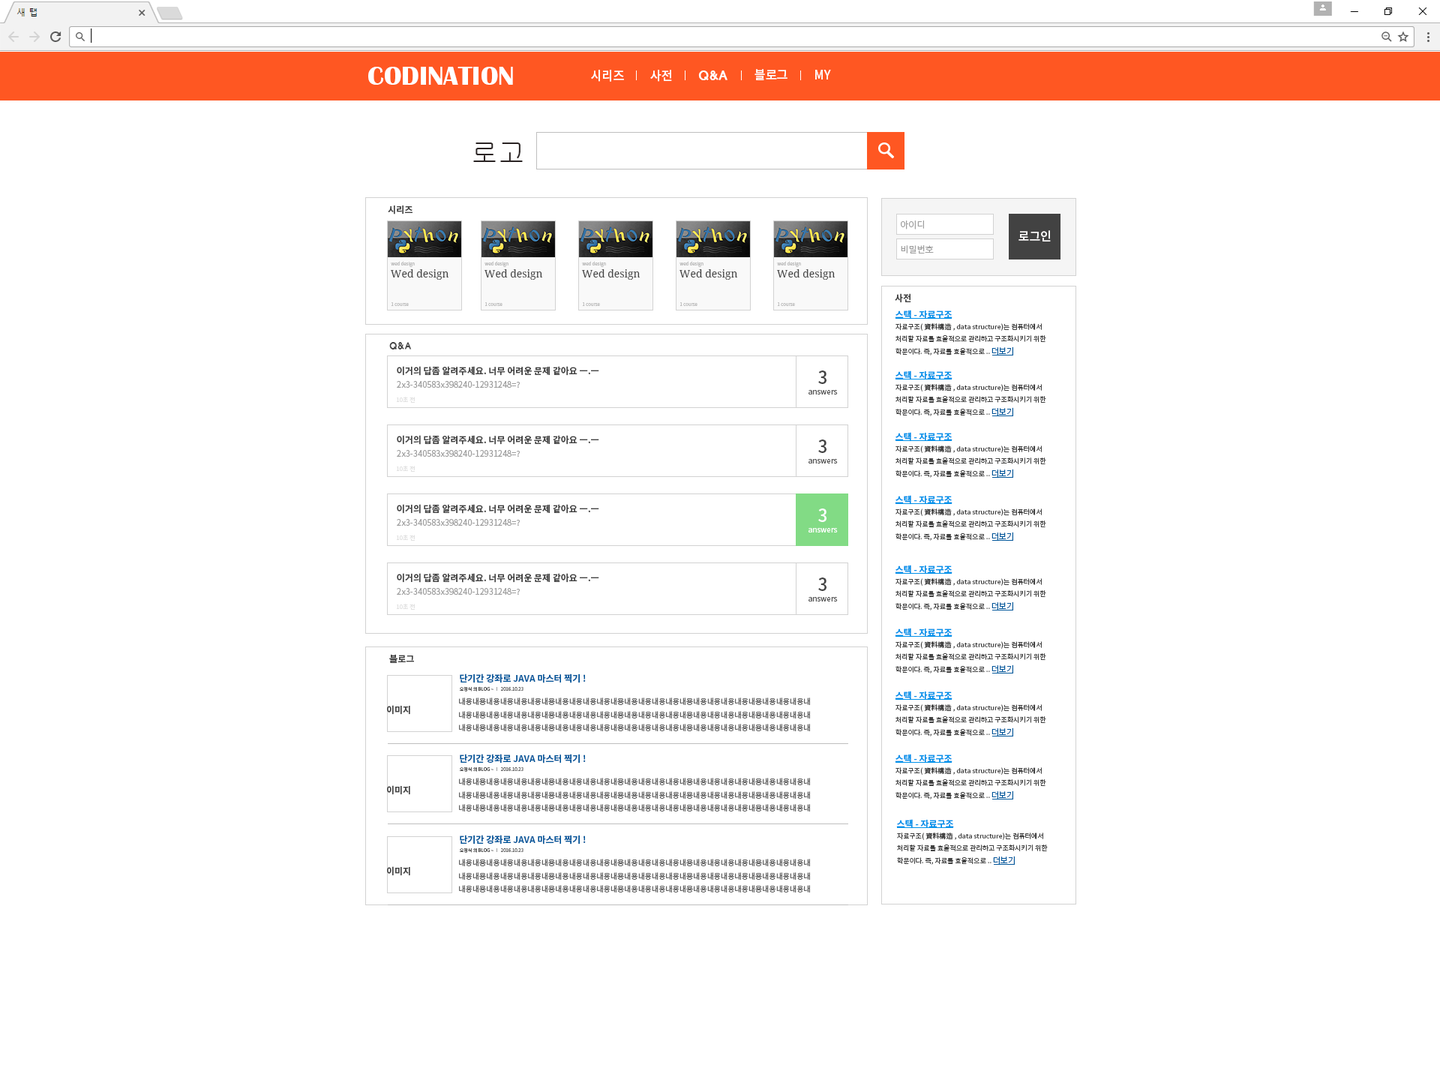
<style>
.page{position:relative;width:1440px;height:1077px;background:#ffffff}
.page>*{position:absolute;margin:0}
.t1{font:27px "BritannicBold";color:#ffffff}
.t2{font:12.4px "NotoSansCJKkr-Medium";letter-spacing:-0.01em;color:#ffffff}
.t3{font:12.4px "HYwulB";letter-spacing:-0.025em;color:#ffffff}
.t4{font:27px "Gulim";color:#2a2323}
.t5{font:9px "NotoSansCJKkr-Bold";color:#424242}
.t6{font:9px "NotoSansCJKkr-DemiLight";color:#9e9e9e}
.t7{font:12px "NotoSansCJKkr-Medium";color:#fffefe}
.t8{font:10.5px "NotoSerif";color:#424242}
.t9{font:4.5px "NotoSansCJKkr-Regular";color:#bdbdbd}
.t10{font:9px "NotoSansCJKkr-Bold";color:#0091ea}
.t11{font:6.8px "NotoSansCJKkr-Regular";color:#424242}
.t12{font:8.2px "NotoSansCJKkr-Regular";color:#01579b}
.t13{font:9px "HYwulB";color:#424242}
.t14{font:18px "NotoSansCJKkr-Medium";color:#424242}
.t15{font:8.2px "NotoSansCJKkr-Regular";color:#9e9e9e}
.t16{font:7.5px "NotoSansCJKkr-Regular";color:#505050}
.t17{font:6px "NotoSansCJKkr-Regular";color:#e0e0e0}
.t18{font:18px "NotoSansCJKkr-Medium";color:#ffffff}
.t19{font:7.5px "NotoSansCJKkr-Regular";color:#ffffff}
.t20{font:9px "NotoSansCJKkr-Bold";color:#01579b}
.t21{font:4.5px "NotoSansCJKkr-Regular";color:#424242}
.t22{font:4.5px "NotoSansCJKkr-Regular";color:#616161}
.t23{font:7.5px "NotoSansCJKkr-Regular";color:#616161}
</style>
<div class="page">
<p class="t1" style="left:368px;top:67px;width:145px;height:18px">CODINATION</p>
<p class="t2" style="left:591px;top:70px;width:33px;height:12px">시리즈</p>
<p class="t2" style="left:650px;top:70px;width:22px;height:12px">사전</p>
<p class="t3" style="left:698px;top:70px;width:30px;height:10px">Q&amp;A</p>
<p class="t2" style="left:754px;top:69px;width:34px;height:11px">블로그</p>
<p class="t2" style="left:815px;top:70px;width:16px;height:10px">MY</p>
<p class="t4" style="left:473px;top:142px;width:50px;height:20px">로고</p>
<p class="t5" style="left:388px;top:206px;width:24px;height:8px">시리즈</p>
<p class="t6" style="left:901px;top:220px;width:23px;height:10px">아이디</p>
<p class="t7" style="left:1018px;top:230px;width:33px;height:12px">로그인</p>
<p class="t6" style="left:901px;top:245px;width:33px;height:9px">비밀번호</p>
<p class="t8" style="left:390px;top:269px;width:59px;height:11px">Wed design</p>
<p class="t9" style="left:391px;top:261px;width:24px;height:6px">wed design</p>
<p class="t8" style="left:484px;top:269px;width:59px;height:11px">Wed design</p>
<p class="t9" style="left:484px;top:261px;width:24px;height:6px">wed design</p>
<p class="t8" style="left:581px;top:269px;width:59px;height:11px">Wed design</p>
<p class="t9" style="left:582px;top:261px;width:24px;height:6px">wed design</p>
<p class="t8" style="left:679px;top:269px;width:59px;height:11px">Wed design</p>
<p class="t9" style="left:680px;top:261px;width:24px;height:6px">wed design</p>
<p class="t8" style="left:776px;top:269px;width:60px;height:11px">Wed design</p>
<p class="t9" style="left:777px;top:261px;width:24px;height:6px">wed design</p>
<p class="t5" style="left:895px;top:293px;width:16px;height:10px">사전</p>
<p class="t9" style="left:391px;top:302px;width:18px;height:4px">1 course</p>
<p class="t9" style="left:484px;top:302px;width:18px;height:4px">1 course</p>
<p class="t9" style="left:582px;top:302px;width:18px;height:4px">1 course</p>
<p class="t9" style="left:680px;top:302px;width:18px;height:4px">1 course</p>
<p class="t9" style="left:777px;top:302px;width:18px;height:4px">1 course</p>
<p class="t10" style="left:895px;top:310px;width:57px;height:10px">스택 - 자료구조</p>
<p class="t11" style="left:896px;top:323px;width:150px;height:33px">자료구조(資料構造, data structure)는 컴퓨터에서 처리할 자료를 효율적으로 관리하고 구조화시키기 위한 학문이다. 즉, 자료를 효율적으로 .. <span class="t12">더보기</span></p>
<p class="t13" style="left:389px;top:342px;width:23px;height:8px">Q&amp;A</p>
<p class="t5" style="left:397px;top:366px;width:202px;height:10px">이거의 답좀 알려주세요. 너무 어려운 문제 같아요 ㅡ.ㅡ</p>
<p class="t14" style="left:818px;top:370px;width:8px;height:14px">3</p>
<p class="t10" style="left:895px;top:370px;width:57px;height:10px">스택 - 자료구조</p>
<p class="t15" style="left:397px;top:381px;width:123px;height:7px">2x3-340583x398240-12931248=?</p>
<p class="t16" style="left:808px;top:390px;width:30px;height:4px">answers</p>
<p class="t11" style="left:896px;top:384px;width:150px;height:32px">자료구조(資料構造, data structure)는 컴퓨터에서 처리할 자료를 효율적으로 관리하고 구조화시키기 위한 학문이다. 즉, 자료를 효율적으로 .. <span class="t12">더보기</span></p>
<p class="t17" style="left:397px;top:397px;width:18px;height:6px">10초 전</p>
<p class="t5" style="left:397px;top:435px;width:202px;height:10px">이거의 답좀 알려주세요. 너무 어려운 문제 같아요 ㅡ.ㅡ</p>
<p class="t10" style="left:895px;top:432px;width:57px;height:10px">스택 - 자료구조</p>
<p class="t14" style="left:818px;top:440px;width:8px;height:13px">3</p>
<p class="t11" style="left:896px;top:446px;width:150px;height:32px">자료구조(資料構造, data structure)는 컴퓨터에서 처리할 자료를 효율적으로 관리하고 구조화시키기 위한 학문이다. 즉, 자료를 효율적으로 .. <span class="t12">더보기</span></p>
<p class="t15" style="left:397px;top:450px;width:123px;height:7px">2x3-340583x398240-12931248=?</p>
<p class="t16" style="left:808px;top:459px;width:30px;height:5px">answers</p>
<p class="t17" style="left:397px;top:466px;width:18px;height:6px">10초 전</p>
<p class="t10" style="left:895px;top:495px;width:57px;height:10px">스택 - 자료구조</p>
<p class="t5" style="left:397px;top:504px;width:202px;height:10px">이거의 답좀 알려주세요. 너무 어려운 문제 같아요 ㅡ.ㅡ</p>
<p class="t18" style="left:818px;top:508px;width:8px;height:14px">3</p>
<p class="t11" style="left:896px;top:508px;width:150px;height:33px">자료구조(資料構造, data structure)는 컴퓨터에서 처리할 자료를 효율적으로 관리하고 구조화시키기 위한 학문이다. 즉, 자료를 효율적으로 .. <span class="t12">더보기</span></p>
<p class="t15" style="left:397px;top:519px;width:123px;height:7px">2x3-340583x398240-12931248=?</p>
<p class="t19" style="left:808px;top:528px;width:30px;height:4px">answers</p>
<p class="t17" style="left:397px;top:535px;width:18px;height:6px">10초 전</p>
<p class="t10" style="left:895px;top:565px;width:57px;height:9px">스택 - 자료구조</p>
<p class="t5" style="left:397px;top:573px;width:202px;height:10px">이거의 답좀 알려주세요. 너무 어려운 문제 같아요 ㅡ.ㅡ</p>
<p class="t14" style="left:818px;top:578px;width:8px;height:13px">3</p>
<p class="t11" style="left:896px;top:578px;width:150px;height:32px">자료구조(資料構造, data structure)는 컴퓨터에서 처리할 자료를 효율적으로 관리하고 구조화시키기 위한 학문이다. 즉, 자료를 효율적으로 .. <span class="t12">더보기</span></p>
<p class="t15" style="left:397px;top:588px;width:123px;height:7px">2x3-340583x398240-12931248=?</p>
<p class="t17" style="left:397px;top:604px;width:18px;height:6px">10초 전</p>
<p class="t16" style="left:808px;top:597px;width:30px;height:5px">answers</p>
<p class="t10" style="left:895px;top:628px;width:57px;height:10px">스택 - 자료구조</p>
<p class="t11" style="left:896px;top:641px;width:150px;height:33px">자료구조(資料構造, data structure)는 컴퓨터에서 처리할 자료를 효율적으로 관리하고 구조화시키기 위한 학문이다. 즉, 자료를 효율적으로 .. <span class="t12">더보기</span></p>
<p class="t5" style="left:389px;top:654px;width:25px;height:9px">블로그</p>
<p class="t20" style="left:460px;top:674px;width:126px;height:9px">단기간 강좌로 JAVA 마스터 찍기 !</p>
<p class="t21" style="left:459px;top:686px;width:35px;height:6px">오정식 의 BLOG ~</p>
<p class="t22" style="left:500px;top:687px;width:24px;height:4px">2016.10.23</p>
<p class="t23" style="left:459px;top:698px;width:351px;height:33px">내용내용내용내용내용내용내용내용내용내용내용내용내용내용내용내용내용내용내용내용내용내용내용내용내용내<br>내용내용내용내용내용내용내용내용내용내용내용내용내용내용내용내용내용내용내용내용내용내용내용내용내용내<br>내용내용내용내용내용내용내용내용내용내용내용내용내용내용내용내용내용내용내용내용내용내용내용내용내용내</p>
<p class="t10" style="left:895px;top:691px;width:57px;height:9px">스택 - 자료구조</p>
<p class="t5" style="left:387px;top:705px;width:23px;height:10px">이미지</p>
<p class="t11" style="left:896px;top:704px;width:150px;height:32px">자료구조(資料構造, data structure)는 컴퓨터에서 처리할 자료를 효율적으로 관리하고 구조화시키기 위한 학문이다. 즉, 자료를 효율적으로 .. <span class="t12">더보기</span></p>
<p class="t20" style="left:460px;top:754px;width:126px;height:10px">단기간 강좌로 JAVA 마스터 찍기 !</p>
<p class="t10" style="left:895px;top:754px;width:57px;height:10px">스택 - 자료구조</p>
<p class="t21" style="left:459px;top:766px;width:35px;height:6px">오정식 의 BLOG ~</p>
<p class="t22" style="left:500px;top:767px;width:24px;height:4px">2016.10.23</p>
<p class="t11" style="left:896px;top:767px;width:150px;height:33px">자료구조(資料構造, data structure)는 컴퓨터에서 처리할 자료를 효율적으로 관리하고 구조화시키기 위한 학문이다. 즉, 자료를 효율적으로 .. <span class="t12">더보기</span></p>
<p class="t5" style="left:387px;top:785px;width:23px;height:10px">이미지</p>
<p class="t23" style="left:459px;top:778px;width:351px;height:34px">내용내용내용내용내용내용내용내용내용내용내용내용내용내용내용내용내용내용내용내용내용내용내용내용내용내<br>내용내용내용내용내용내용내용내용내용내용내용내용내용내용내용내용내용내용내용내용내용내용내용내용내용내<br>내용내용내용내용내용내용내용내용내용내용내용내용내용내용내용내용내용내용내용내용내용내용내용내용내용내</p>
<p class="t10" style="left:896px;top:819px;width:58px;height:10px">스택 - 자료구조</p>
<p class="t11" style="left:897px;top:832px;width:151px;height:33px">자료구조(資料構造, data structure)는 컴퓨터에서 처리할 자료를 효율적으로 관리하고 구조화시키기 위한 학문이다. 즉, 자료를 효율적으로 .. <span class="t12">더보기</span></p>
<p class="t20" style="left:460px;top:835px;width:126px;height:9px">단기간 강좌로 JAVA 마스터 찍기 !</p>
<p class="t21" style="left:459px;top:848px;width:35px;height:5px">오정식 의 BLOG ~</p>
<p class="t22" style="left:500px;top:848px;width:24px;height:4px">2016.10.23</p>
<p class="t5" style="left:387px;top:866px;width:23px;height:10px">이미지</p>
<p class="t23" style="left:459px;top:859px;width:351px;height:33px">내용내용내용내용내용내용내용내용내용내용내용내용내용내용내용내용내용내용내용내용내용내용내용내용내용내<br>내용내용내용내용내용내용내용내용내용내용내용내용내용내용내용내용내용내용내용내용내용내용내용내용내용내<br>내용내용내용내용내용내용내용내용내용내용내용내용내용내용내용내용내용내용내용내용내용내용내용내용내용내</p>
</div>
